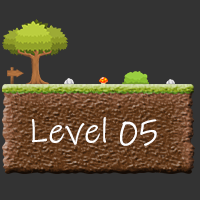
<style>
.page{position:relative;width:200px;height:200px;background:#333333}
.page>*{position:absolute;margin:0}
.t1{font:36px "InkFree";color:#ffffff}
</style>
<div class="page">
<p class="t1" style="left:32px;top:117px;width:125px;height:29px">Level 05</p>
</div>
